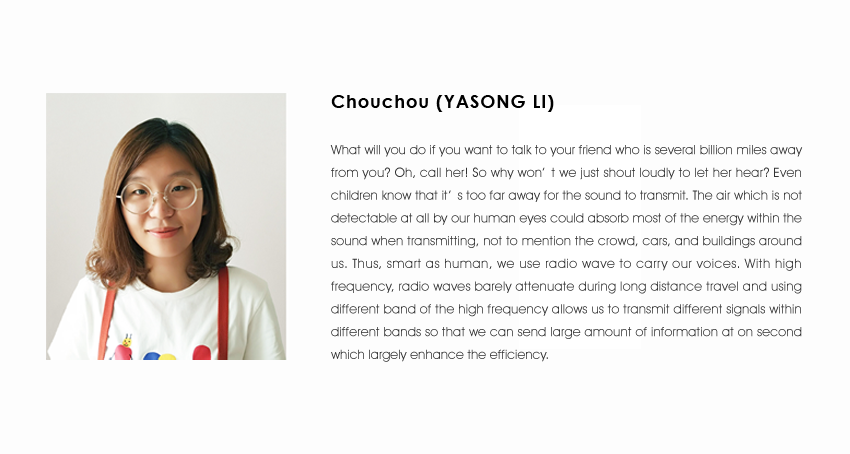
<style>
.page{position:relative;width:850px;height:454px;background:#fdfdfd}
.page>*{position:absolute;margin:0}
.t1{font:18px "CenturyGothic-Bold";letter-spacing:0.05em;color:#000000}
.t2{font:13px "AvantGardeITCbyBT-Book";color:#313131}
</style>
<div class="page">
<p class="t1" style="left:331px;top:95px;width:223px;height:17px">Chouchou (YASONG LI)</p>
<p class="t2" style="left:330px;top:145px;width:473px;height:217px;text-align:justify">What will you do if you want to talk to your friend who is several billion miles away from you? Oh, call her! So why won’t we just shout loudly to let her hear? Even children know that it’s too far away for the sound to transmit. The air which is not detectable at all by our human eyes could absorb most of the energy within the sound when transmitting, not to mention the crowd, cars, and buildings around us. Thus, smart as human, we use radio wave to carry our voices. With high frequency, radio waves barely attenuate during long distance travel and using different band of the high frequency allows us to transmit different signals within different bands so that we can send large amount of information at on second which largely enhance the efficiency.</p>
</div>
